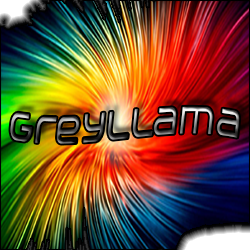
<style>
.page{position:relative;width:250px;height:250px}
.page>*{position:absolute;margin:0}
.t1{font:69.4px "Arkitech-Bold";font-style:italic;scale:0.6 1}
</style>
<div class="page">
<p class="t1" style="left:10px;top:106px;width:230px;height:38px">GreyLlama</p>
</div>
